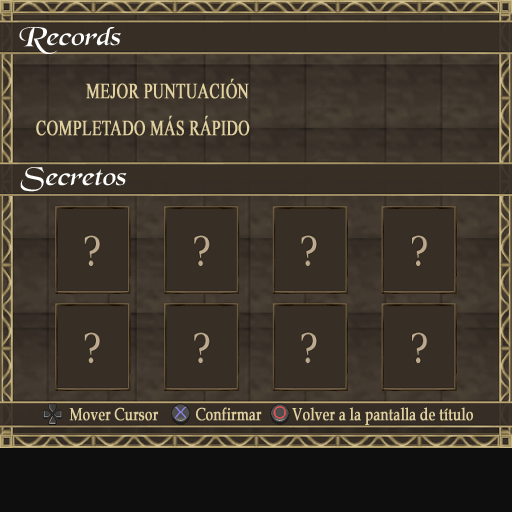
<style>
.page{position:relative;width:512px;height:512px;background:#372f26}
.page>*{position:absolute;margin:0}
.t1{font:27.1px "BlackChancery";color:#ffffff;font-style:italic;scale:1.12 1}
.t2{font:21.6px "TimesNewRomanPSMT";color:#e0d19f;font-weight:bold;scale:0.72 1}
.t3{font:17.3px "BookAntiqua";color:#e0d19f;font-weight:bold;scale:0.78 1}
</style>
<div class="page">
<p class="t1" style="left:19px;top:27px;width:102px;height:27px">Records</p>
<p class="t2" style="left:86px;top:78px;width:163px;height:21px">MEJOR PUNTUACIÓN</p>
<p class="t2" style="left:36px;top:115px;width:214px;height:21px">COMPLETADO MÁS RÁPIDO</p>
<p class="t1" style="left:20px;top:167px;width:107px;height:25px">Secretos</p>
<p class="t3" style="left:69px;top:407px;width:89px;height:14px">Mover Cursor</p>
<p class="t3" style="left:196px;top:407px;width:66px;height:14px">Confirmar</p>
<p class="t3" style="left:292px;top:407px;width:181px;height:18px">Volver a la pantalla de título</p>
</div>
